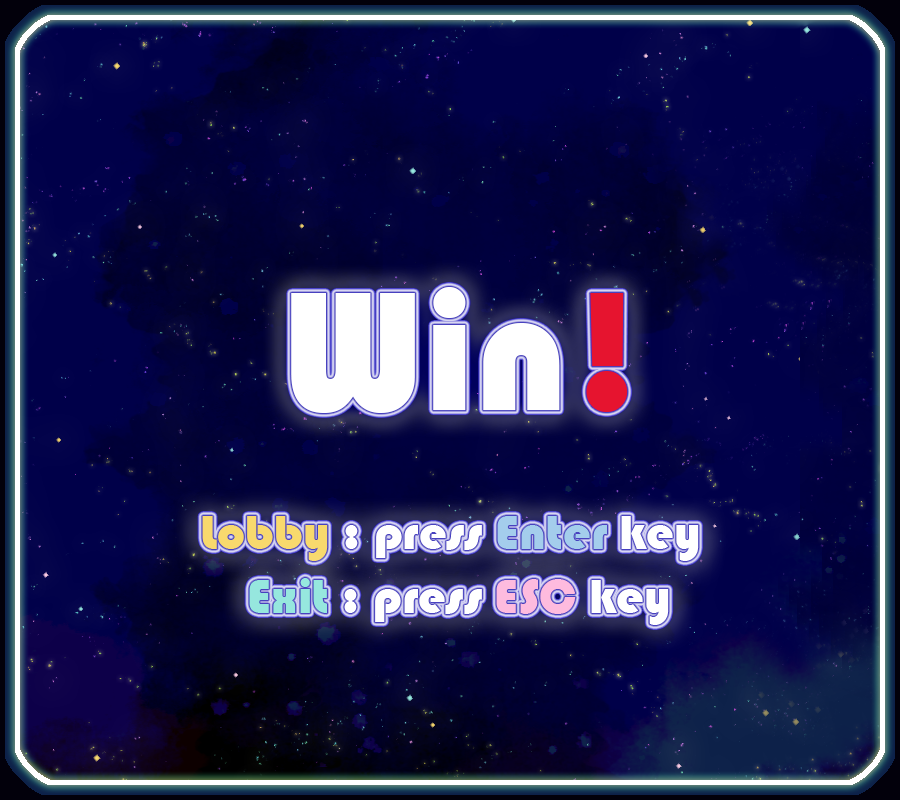
<style>
.page{position:relative;width:900px;height:800px}
.page>*{position:absolute;margin:0}
.t1{font:175px "Bauhaus93";color:#ffffff}
.t2{font:175px "Bauhaus93";color:#e6142f}
.t3{font:50px "Bauhaus93";color:#ffffff}
.t4{font:50px "Bauhaus93";color:#f8d96d}
.t5{font:50px "Bauhaus93";color:#a4cdec}
.t6{font:50px "Bauhaus93";color:#96e7de}
.t7{font:50px "Bauhaus93";color:#febbde}
</style>
<div class="page">
<p class="t1" style="left:291px;top:287px;width:337px;height:126px">Win<span class="t2">!</span></p>
<p class="t3" style="left:202px;top:516px;width:497px;height:45px"><span class="t4">Lobby</span> : press <span class="t5">Enter </span>key</p>
<p class="t3" style="left:249px;top:578px;width:420px;height:47px"><span class="t6">Exit </span>: press <span class="t7">ESC </span>key</p>
</div>
